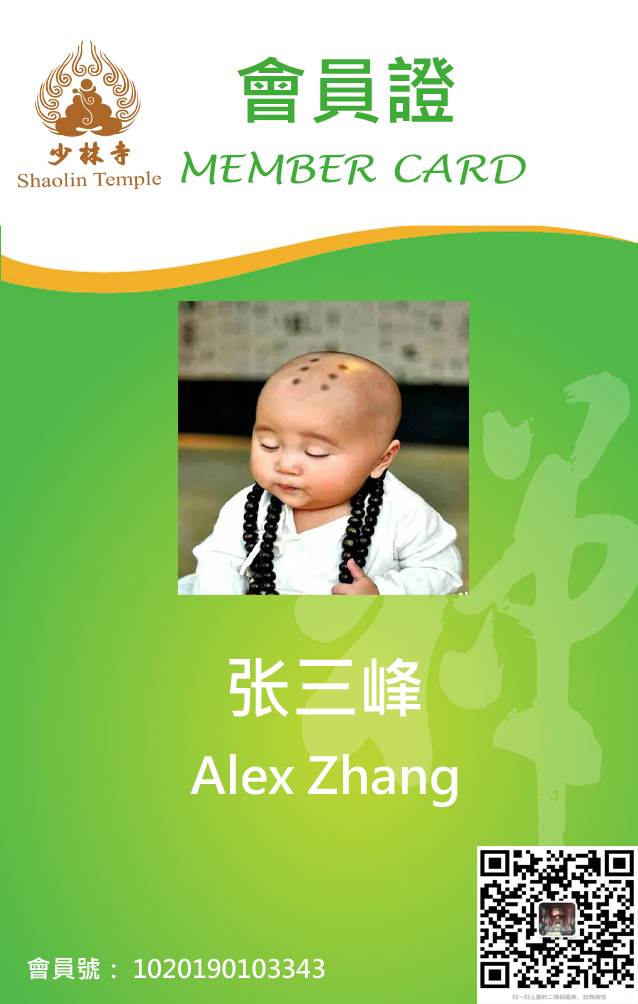
<style>
.page{position:relative;width:638px;height:1004px;background:#ffffff}
.page>*{position:absolute;margin:0}
.t1{font:75px "MicrosoftJhengHeiBold";color:#3fac37}
.t2{font:37.5px "LucidaHandwriting-Italic";color:#3fac37;scale:1.14 1}
.t3{font:66.7px "MicrosoftJhengHeiBold";color:#ffffff}
.t4{font:50px "MicrosoftJhengHeiBold";color:#ffffff}
.t5{font:25px "MicrosoftJhengHeiBold";color:#ffffff}
</style>
<div class="page">
<p class="t1" style="left:237px;top:56px;width:218px;height:68px">會員證</p>
<p class="t2" style="left:181px;top:151px;width:345px;height:34px">MEMBER CARD</p>
<p class="t3" style="left:229px;top:657px;width:193px;height:60px">张三峰</p>
<p class="t4" style="left:190px;top:754px;width:268px;height:53px">Alex Zhang</p>
<p class="t5" style="left:27px;top:957px;width:298px;height:23px">會員號： 1020190103343</p>
</div>
